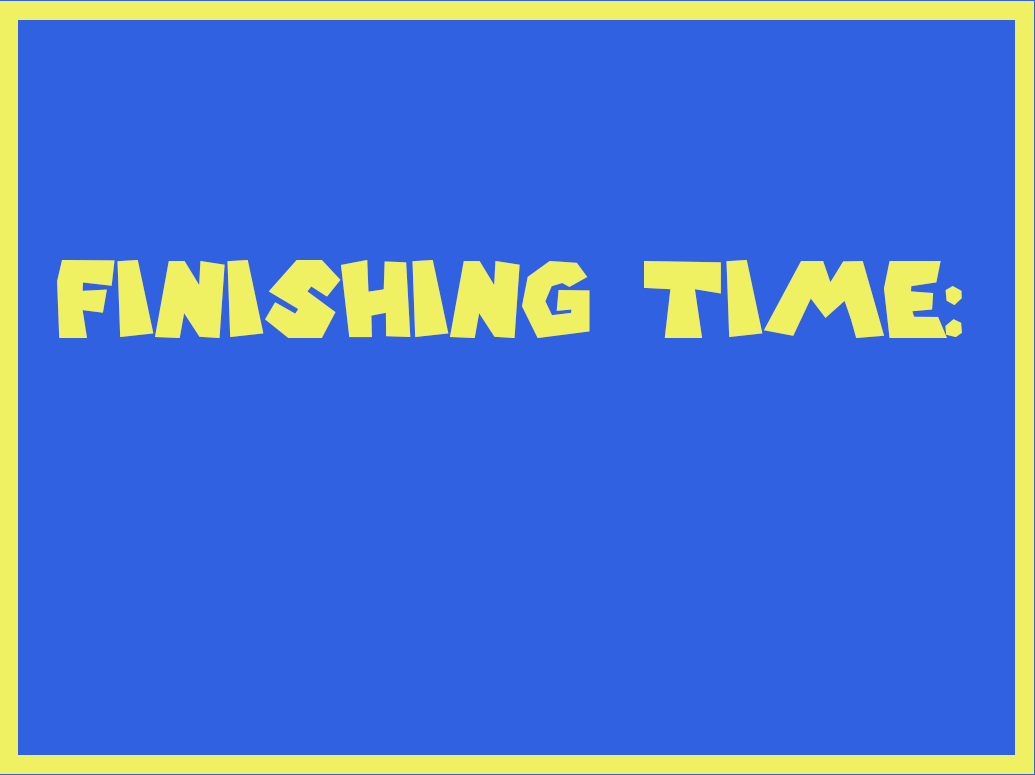
<style>
.page{position:relative;width:1035px;height:775px;background:#2f61e1}
.page>*{position:absolute;margin:0}
.t1{font:104.2px "SuperMarioGalaxy";color:#eff163}
</style>
<div class="page">
<p class="t1" style="left:57px;top:260px;width:905px;height:78px">FINISHING TIME:</p>
</div>
